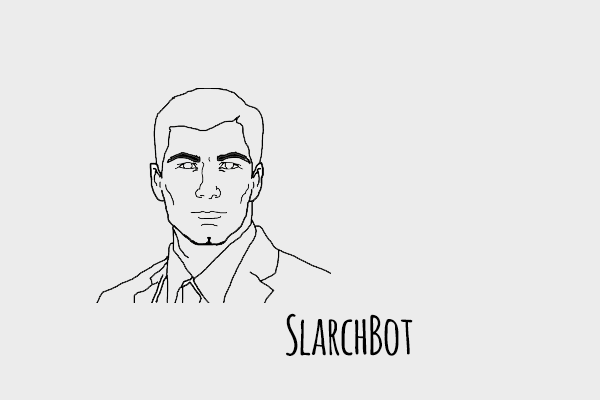
<style>
.page{position:relative;width:600px;height:400px;background:#ececec}
.page>*{position:absolute;margin:0}
.t1{font:53.2px "Amatic-Bold";color:#000000}
</style>
<div class="page">
<p class="t1" style="left:286px;top:313px;width:127px;height:43px">SlarchBot</p>
</div>
